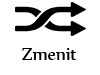
<style>
.page{position:relative;width:100px;height:75px;background:#ffffff}
.page>*{position:absolute;margin:0}
.t1{font:20.8px "Nyala-Regular";color:#020000}
</style>
<div class="page">
<p class="t1" style="left:22px;top:48px;width:55px;height:12px">Zmenit</p>
</div>
